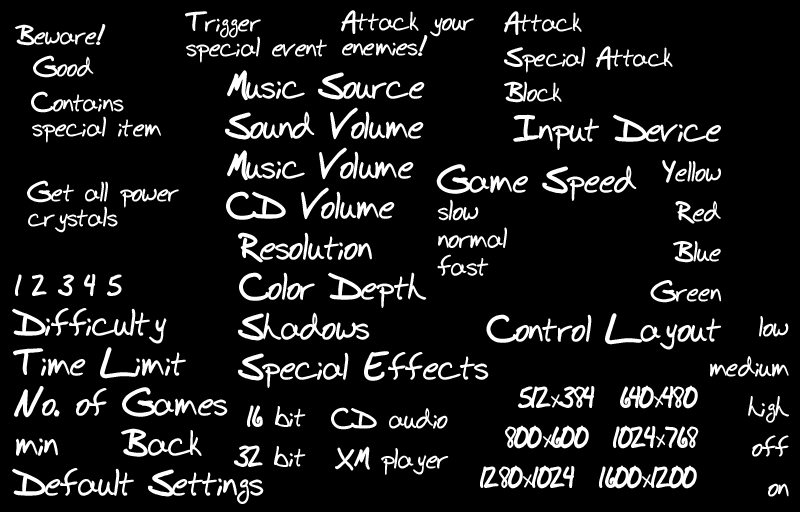
<style>
.page{position:relative;width:800px;height:512px;background:#000000}
.page>*{position:absolute;margin:0}
.t1{font:25px/25px "BudHand-Bold";color:#ffffff}
.t2{font:25px/35px "BudHand-Bold";color:#ffffff}
.t3{font:25px "BudHand-Bold";color:#ffffff}
.t4{font:34px/40px "BudHand-Bold";color:#ffffff}
.t5{font:26px/40px "BudHand-Bold";color:#ffffff}
.t6{font:26px/27.8px "BudHand-Bold";color:#ffffff}
.t7{font:34px/27.8px "BudHand-Bold";color:#ffffff}
</style>
<div class="page">
<p class="t1" style="left:185px;top:11px;width:142px;height:52px">Trigger<br>special event</p>
<p class="t1" style="left:341px;top:10px;width:133px;height:46px">Attack your<br>enemies!</p>
<p class="t2" style="left:504px;top:11px;width:169px;height:92px">Attack <br>Special Attack <br>Block</p>
<p class="t3" style="left:15px;top:24px;width:91px;height:22px">Beware!</p>
<p class="t3" style="left:33px;top:55px;width:61px;height:23px">Good</p>
<p class="t4" style="left:225px;top:70px;width:200px;height:150px">Music Source<br>Sound Volume<br>Music Volume<br>CD Volume</p>
<p class="t1" style="left:31px;top:91px;width:130px;height:52px">Contains<br>special item</p>
<p class="t5" style="left:486px;top:114px;width:235px;height:236px;text-align:right"><span class="t4">Input Device<br></span>Yellow<br>Red<br>Blue<br>Green<span class="t4"><br>Control Layout</span></p>
<p class="t6" style="left:436px;top:164px;width:201px;height:112px"><span class="t7">Game Speed<br></span>slow<br>normal<br>fast</p>
<p class="t1" style="left:27px;top:180px;width:152px;height:53px">Get all power<br>crystals</p>
<p class="t4" style="left:238px;top:232px;width:251px;height:156px">Resolution<br>Color Depth<br>Shadows<br>Special Effects</p>
<p class="t4" style="left:12px;top:274px;width:252px;height:230px"><span class="t5">1 2 3 4 5</span><br>Difficulty<br>Time Limit<br>No. of Games<br>min    Back<br>Default Settings</p>
<p class="t5" style="left:710px;top:316px;width:79px;height:181px;text-align:right">low<br>medium<br>high<br>off<br>on</p>
<p class="t5" style="left:480px;top:385px;width:219px;height:104px;text-align:right">512x384  640x480<br>800x600  1024x768<br>1280x1024  1600x1200</p>
<p class="t5" style="left:234px;top:405px;width:72px;height:62px;text-align:right">16 bit<br>32 bit</p>
<p class="t5" style="left:331px;top:407px;width:118px;height:68px;text-align:right">CD audio<br>XM player</p>
</div>
